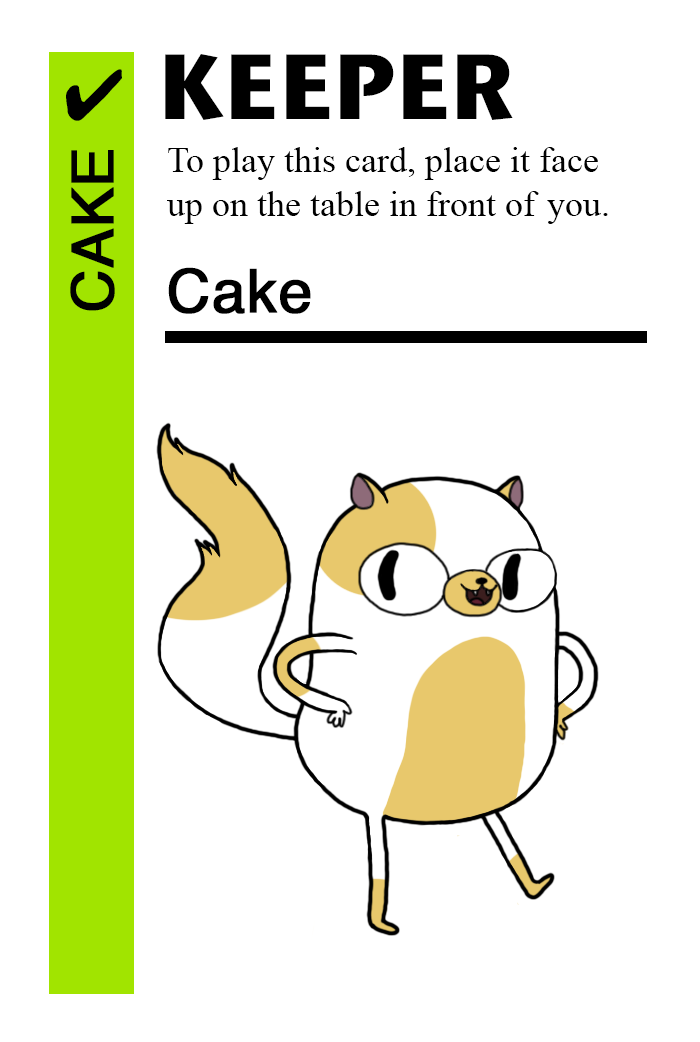
<style>
.page{position:relative;width:700px;height:1042px;background:#ffffff}
.page>*{position:absolute;margin:0}
.t1{font:92px "StoneSansITC-Bold";color:#000000}
.t2{font:72px "MS-Gothic";color:#000000}
.t3{font:58px "Helvetica";color:#000000;font-weight:bold}
.t4{font:36px "TimesNewRomanPSMT";color:#000000}
.t5{font:60px "Helvetica";color:#000000;font-weight:bold}
</style>
<div class="page">
<p class="t1" style="left:165px;top:54px;width:348px;height:66px">KEEPER</p>
<p class="t2" style="left:66px;top:69px;width:56px;height:52px">✔</p>
<p class="t3" style="left:70px;top:150px;width:45px;height:161px;rotate:-90deg">CAKE</p>
<p class="t4" style="left:167px;top:147px;width:441px;height:77px">To play this card, place it face<br>up on the table in front of you.</p>
<p class="t5" style="left:168px;top:267px;width:143px;height:47px">Cake</p>
</div>
